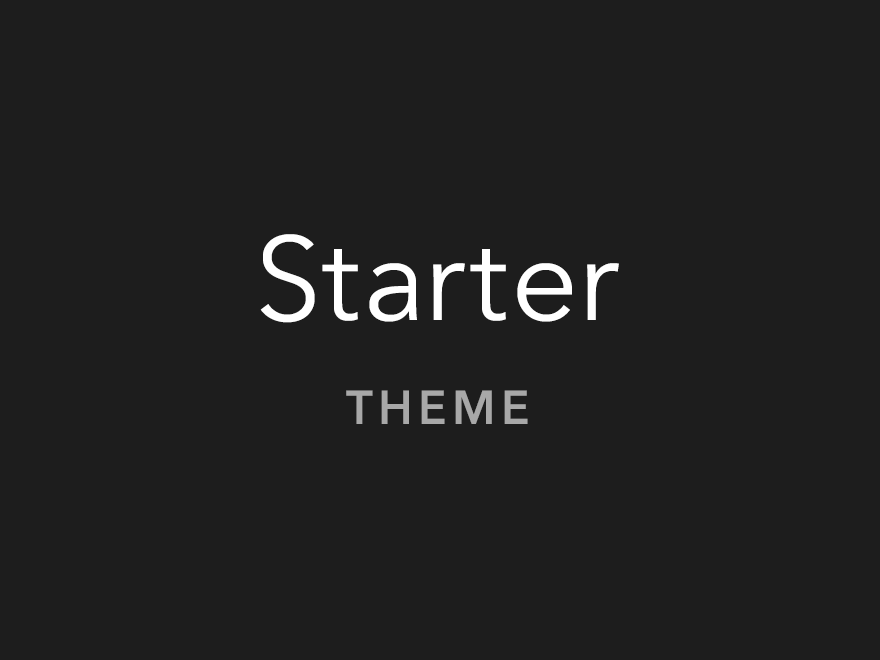
<style>
.page{position:relative;width:880px;height:660px;background:#1d1d1d}
.page>*{position:absolute;margin:0}
.t1{font:118.3px/72.6px "AvenirNext-Regular";letter-spacing:0.05em;color:#ffffff}
.t2{font:47.3px/72.6px "AvenirNext-DemiBold";letter-spacing:0.11em;color:#a8a8a8}
</style>
<div class="page">
<p class="t1" style="left:260px;top:234px;width:359px;height:190px;text-align:center">Starter<br><span class="t2">THEME</span></p>
</div>
